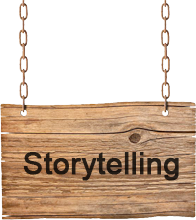
<style>
.page{position:relative;width:196px;height:220px;background:#ffffff}
.page>*{position:absolute;margin:0}
.t1{font:30px "ArialMT";color:#241b14;font-weight:bold}
</style>
<div class="page">
<p class="t1" style="left:23px;top:152px;width:156px;height:29px">Storytelling</p>
</div>
